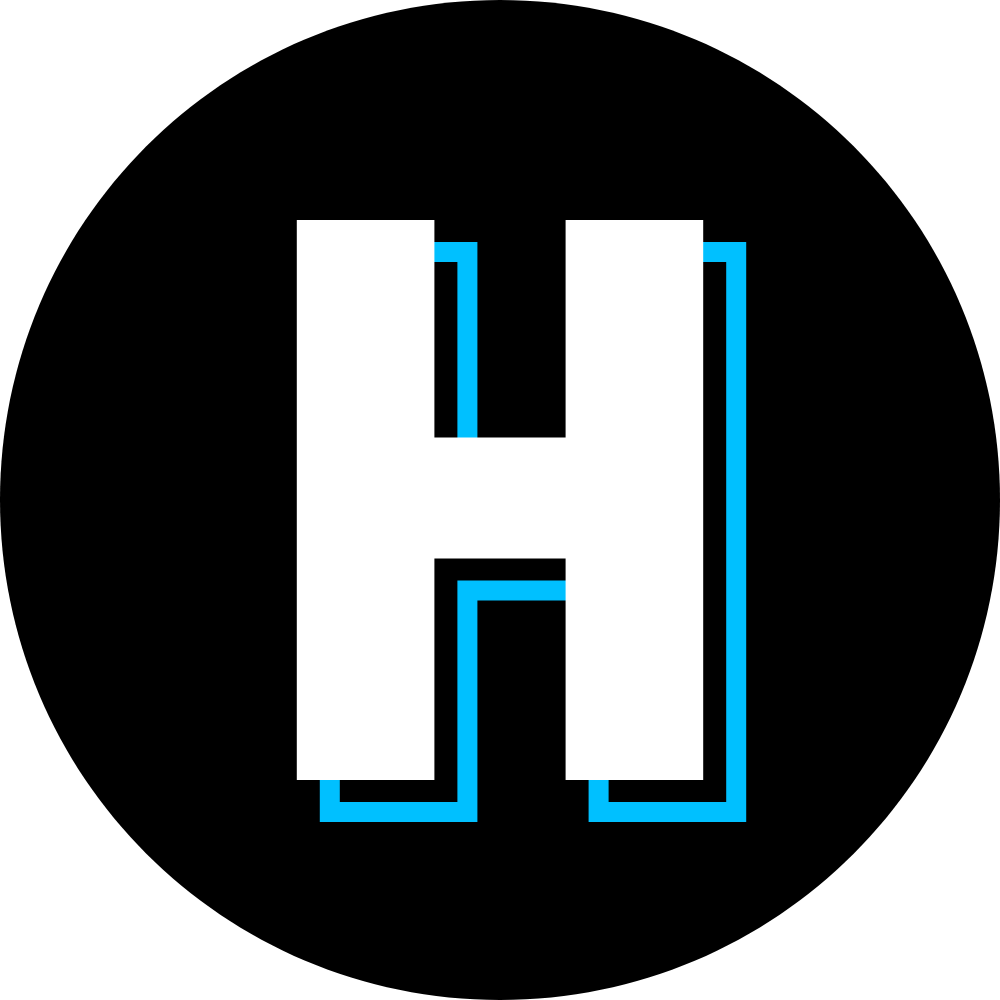
<style>
.page{position:relative;width:1000px;height:1000px;background:#000000}
.page>*{position:absolute;margin:0}
.t1{font:800px "RedHatMono-Bold";color:#ffffff}
</style>
<div class="page">
<p class="t1" style="left:296px;top:220px;width:408px;height:560px">H</p>
</div>
